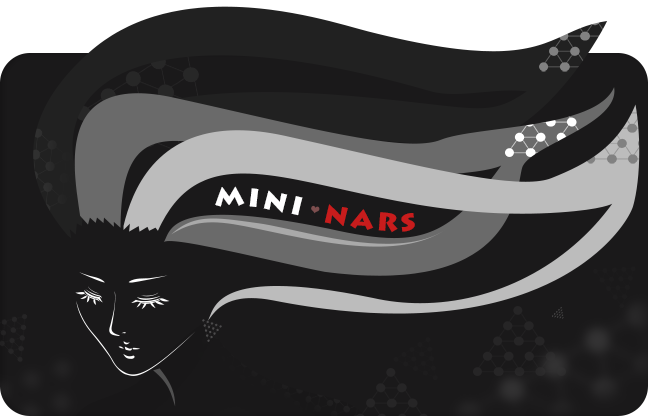
<style>
.page{position:relative;width:648px;height:416px;background:#1a191a}
.page>*{position:absolute;margin:0}
.t1{font:30px "LithosPro-Black";letter-spacing:0.1em;color:#ffffff}
.t2{font:30px "LithosPro-Black";letter-spacing:0.1em;color:#c81c1c}
</style>
<div class="page">
<p class="t1" style="left:215px;top:186px;width:200px;height:47px;rotate:28deg">mini  <span class="t2">nars</span></p>
</div>
